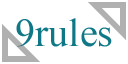
<style>
.page{position:relative;width:128px;height:64px;background:#ffffff}
.page>*{position:absolute;margin:0}
.t1{font:40px "TimesNewRomanPSMT";color:#0e7886}
</style>
<div class="page">
<p class="t1" style="left:16px;top:18px;width:96px;height:29px">9rules</p>
</div>
